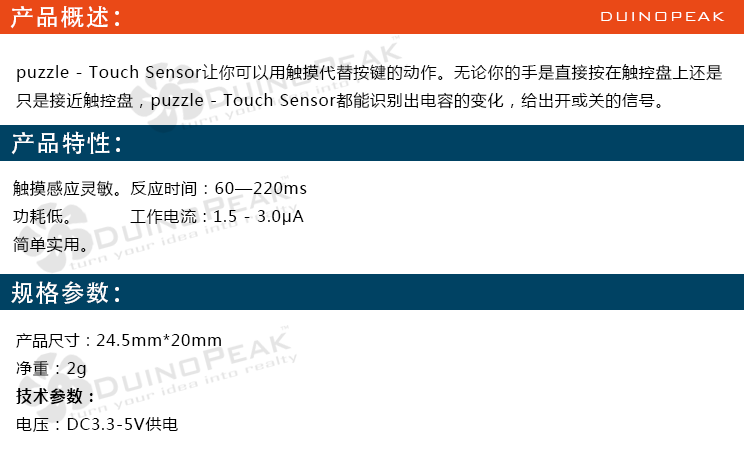
<style>
.page{position:relative;width:744px;height:454px;background:#ffffff}
.page>*{position:absolute;margin:0}
.t1{font:24px "AdobeHeitiStd-Regular";letter-spacing:0.05em;color:#ffffff}
.t2{font:18px "BankGothicBT-Light";letter-spacing:0.05em;color:#ffffff}
.t3{font:16px "MicrosoftYaHei";letter-spacing:0.05em;color:#000000}
.t4{font:16px "MicrosoftYaHei";color:#000000}
.t5{font:16px "MicrosoftYaHei-Bold";letter-spacing:0.05em;color:#000000}
</style>
<div class="page">
<p class="t1" style="left:10px;top:6px;width:109px;height:23px">产品概述：</p>
<p class="t2" style="left:601px;top:12px;width:124px;height:9px">DUINOPEAK</p>
<p class="t3" style="left:16px;top:64px;width:706px;height:46px">puzzle - Touch Sensor让你可以用触摸代替按键的动作。无论你的手是直接按在触控盘上还是<br>只是接近触控盘，puzzle - Touch Sensor都能识别出电容的变化，给出开或关的信号。</p>
<p class="t1" style="left:11px;top:131px;width:109px;height:24px">产品特性：</p>
<p class="t3" style="left:13px;top:180px;width:294px;height:73px">触摸感应灵敏。反应时间：60—220ms<br>功耗低。         工作电流 : 1.5 - 3.0μA<br>简单实用。</p>
<p class="t1" style="left:11px;top:281px;width:108px;height:23px">规格参数：</p>
<p class="t3" style="left:16px;top:333px;width:205px;height:99px"><span class="t4">产品尺寸：</span>24.5mm*20mm<br>净重：2g<br><span class="t5">技术参数：<br></span>电压：DC3.3-5V供电</p>
</div>
